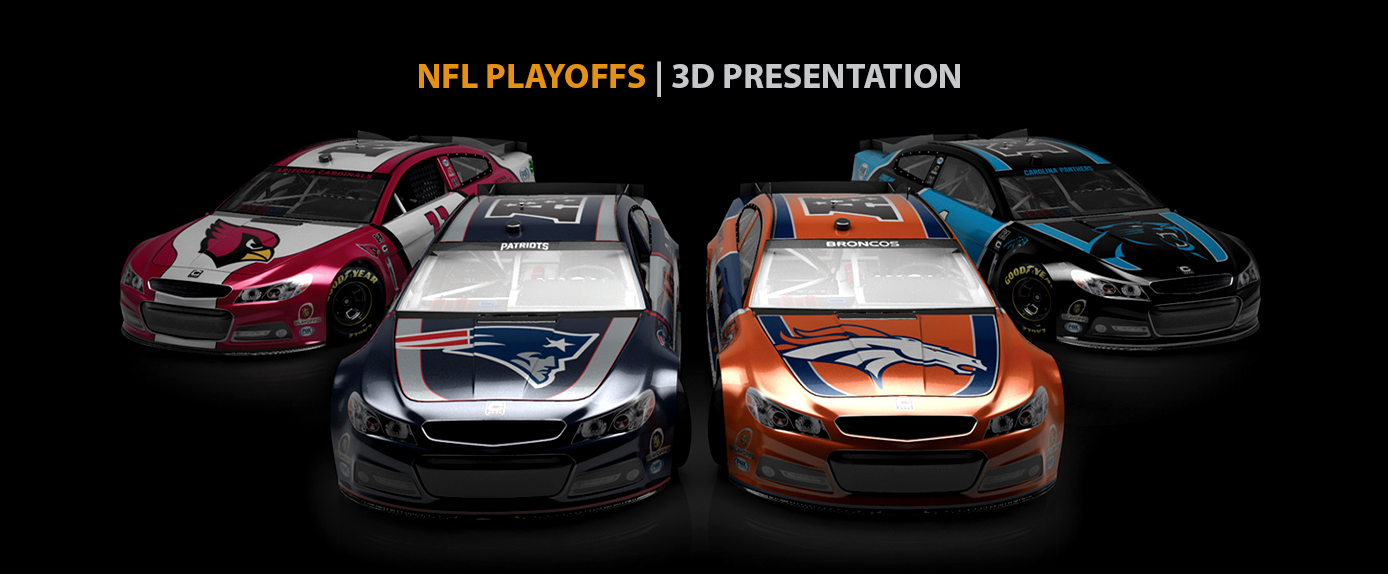
<style>
.page{position:relative;width:1388px;height:574px;background:#000000}
.page>*{position:absolute;margin:0}
.t1{font:35.6px "MyriadPro-Bold";color:#c7c8ca}
.t2{font:35.6px "MyriadPro-Bold";color:#e59114}
</style>
<div class="page">
<p class="t1" style="left:419px;top:61px;width:541px;height:36px"><span class="t2">NFL PLAYOFFS</span> | 3D PRESENTATION</p>
</div>
